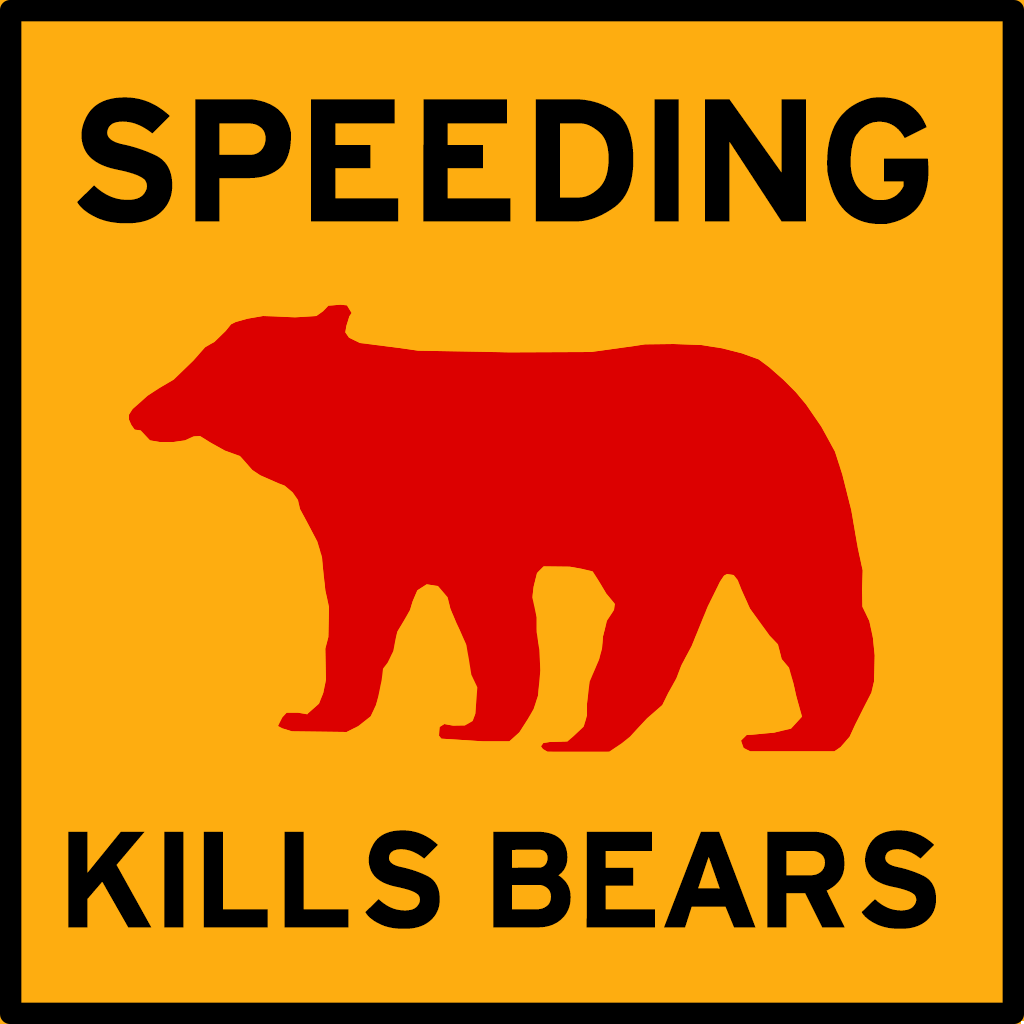
<style>
.page{position:relative;width:1024px;height:1024px;background:#fead10}
.page>*{position:absolute;margin:0}
.t1{font:184.9px "HittheRoad";color:#000000}
.t2{font:144.5px "HittheRoad";color:#000000}
</style>
<div class="page">
<p class="t1" style="left:77px;top:97px;width:852px;height:127px">SPEEDING</p>
<p class="t2" style="left:68px;top:830px;width:868px;height:99px">KILLS BEARS</p>
</div>
